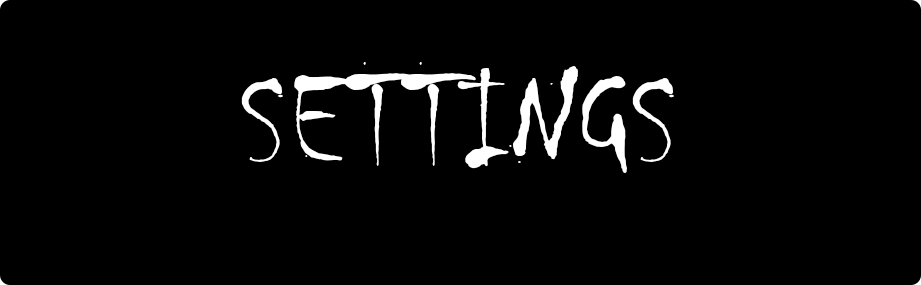
<style>
.page{position:relative;width:921px;height:285px;background:#000000}
.page>*{position:absolute;margin:0}
.t1{font:141.7px "Chiller-Regular";color:#ffffff}
</style>
<div class="page">
<p class="t1" style="left:241px;top:62px;width:433px;height:111px">SETTINGS</p>
</div>
